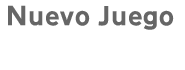
<style>
.page{position:relative;width:185px;height:70px;background:#ffffff}
.page>*{position:absolute;margin:0}
.t1{font:26px "Transport-Heavy-Regular";color:#666666}
</style>
<div class="page">
<p class="t1" style="left:8px;top:5px;width:166px;height:25px">Nuevo Juego</p>
</div>
